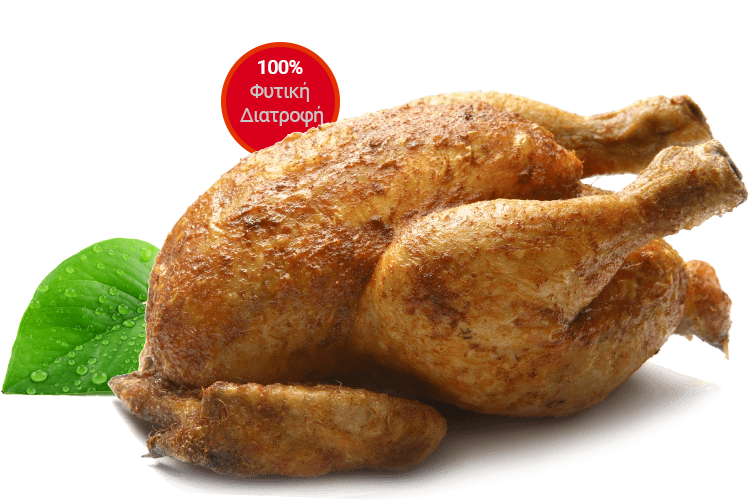
<style>
.page{position:relative;width:749px;height:500px;background:#ffffff}
.page>*{position:absolute;margin:0}
.t1{font:20px "Roboto-Regular";letter-spacing:-0.04em;color:#c7c7c7}
.t2{font:20px "Roboto-Bold";letter-spacing:-0.04em;color:#ffffff}
</style>
<div class="page">
<p class="t1" style="left:240px;top:60px;width:83px;height:67px;text-align:center"><span class="t2">100% <br></span>Φυτική <br>Διατροφή</p>
</div>
